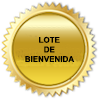
<style>
.page{position:relative;width:100px;height:100px;background:#ffffff}
.page>*{position:absolute;margin:0}
.t1{font:8px "Arial-BoldMT";color:#000000}
</style>
<div class="page">
<p class="t1" style="left:25px;top:36px;width:50px;height:26px;text-align:center">LOTE<br>DE<br>BIENVENIDA</p>
</div>
